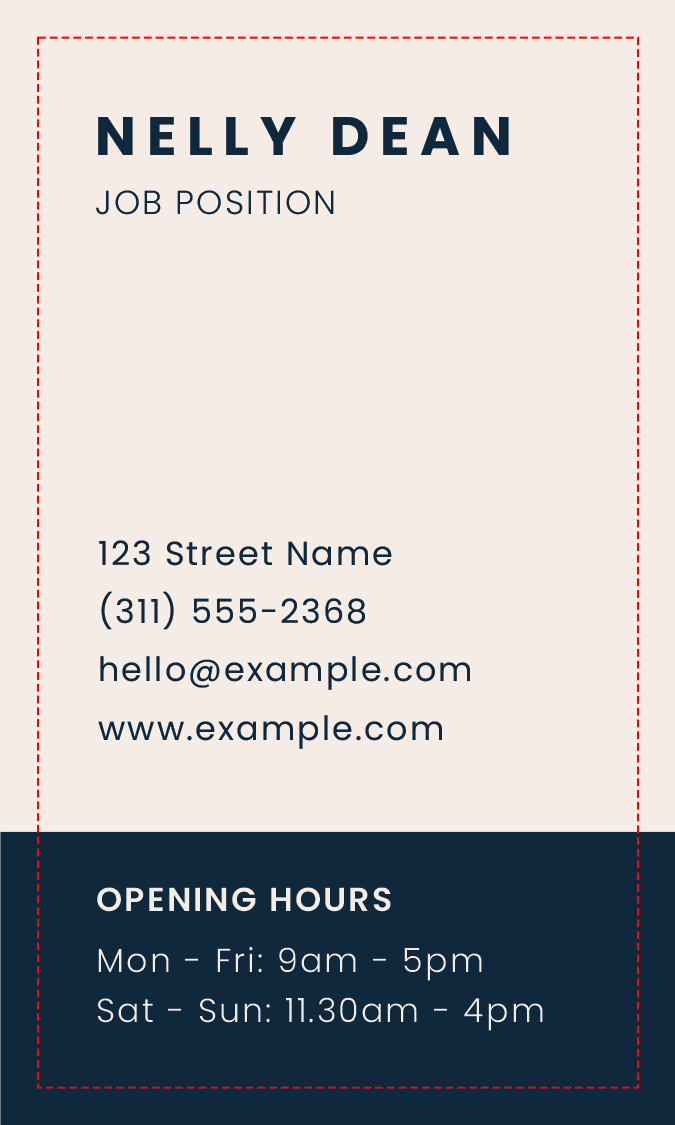
<style>
.page{position:relative;width:675px;height:1125px;background:#f5ede5}
.page>*{position:absolute;margin:0}
.t1{font:54.2px "Poppins-Bold";letter-spacing:0.2em;color:#10283b;text-transform:uppercase}
.t2{font:33.3px "Poppins-Light";letter-spacing:0.063em;color:#10283b;text-transform:uppercase}
.t3{font:33.3px/58.3px "Poppins-Regular";letter-spacing:0.063em;color:#10283b}
.t4{font:33.3px "Poppins-SemiBold";letter-spacing:0.063em;color:#f5ede5;text-transform:uppercase}
.t5{font:33.3px/50px "Poppins-Light";letter-spacing:0.063em;color:#f5ede5}
</style>
<div class="page">
<p class="t1" style="left:98px;top:117px;width:411px;height:38px">Nelly Dean</p>
<p class="t2" style="left:96px;top:190px;width:238px;height:25px">job position</p>
<p class="t3" style="left:98px;top:540px;width:372px;height:209px">123 Street Name<br>(311) 555-2368<br>hello@example.com<br>www.example.com</p>
<p class="t4" style="left:97px;top:887px;width:294px;height:25px">opening hours</p>
<p class="t5" style="left:97px;top:947px;width:446px;height:84px">Mon - Fri: 9am - 5pm<br>Sat - Sun: 11.30am - 4pm</p>
</div>
